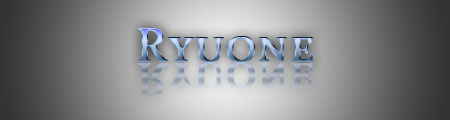
<style>
.page{position:relative;width:450px;height:120px}
.page>*{position:absolute;margin:0}
.t1{font:48px "Constantia";font-variant:small-caps;font-weight:bold}
</style>
<div class="page">
<p class="t1" style="left:138px;top:28px;width:175px;height:35px">Ryuone</p>
<p class="t1" style="left:138px;top:62px;width:175px;height:35px">Ryuone</p>
</div>
